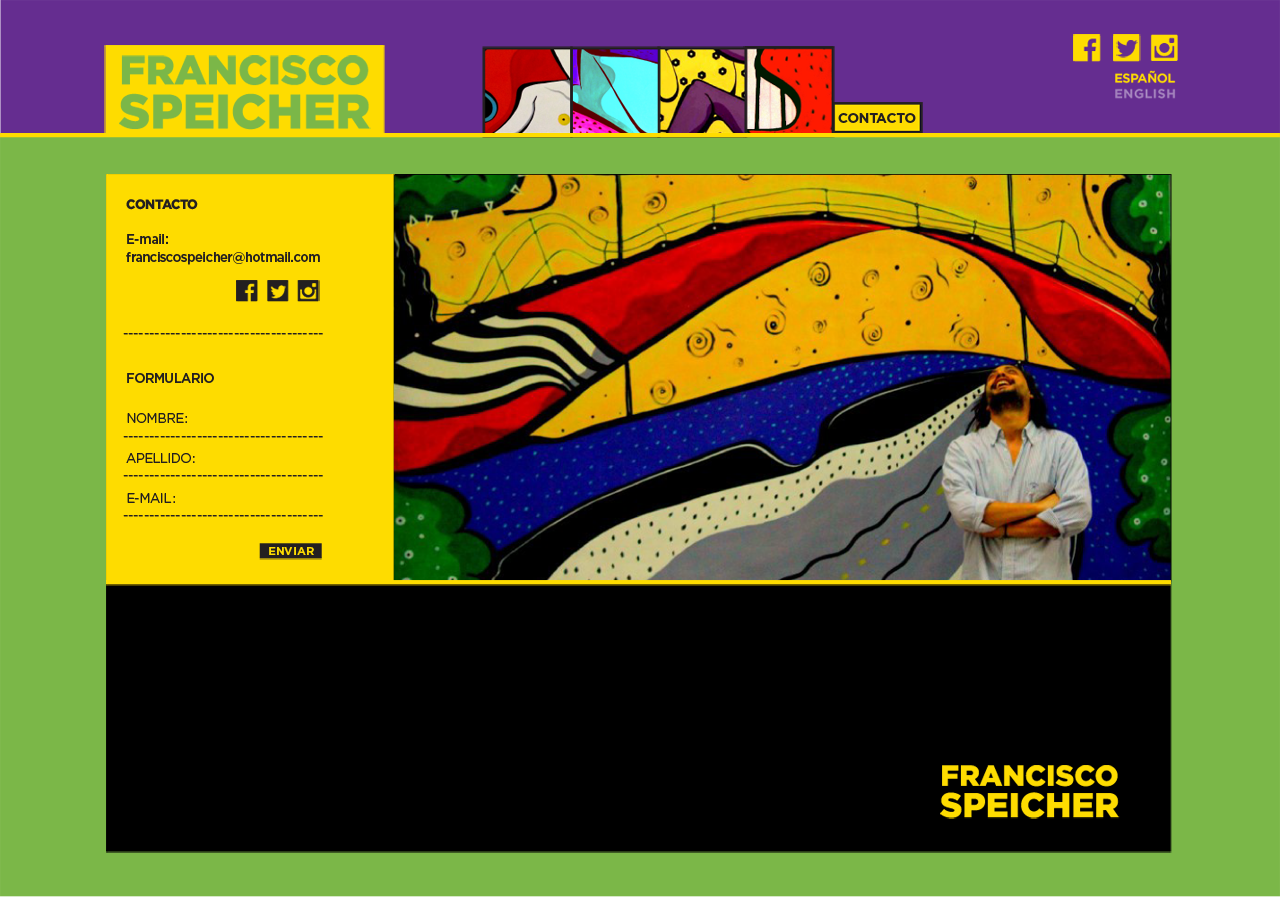
<style>
.page{position:relative;width:1280px;height:897px;background:#000000}
.page>*{position:absolute;margin:0}
.t1{font:13.7px "GothamBold";letter-spacing:-0.02em;color:#231f20}
.t2{font:13.7px/17.4px "GothamMedium";letter-spacing:-0.036em;color:#231f20;scale:0.95 1}
.t3{font:13.7px/17.4px "Gotham-Black";letter-spacing:-0.036em;color:#231f20;scale:0.95 1}
.t4{font:13.7px "GothamBook";color:#231f20;scale:0.95 1}
.t5{font:13.7px/19.9px "GothamBook";letter-spacing:-0.036em;color:#231f20;scale:0.95 1}
.t6{font:13.7px/19.9px "GothamMedium";letter-spacing:-0.036em;color:#231f20;scale:0.95 1}
.t7{font:11.3px "GothamBold";color:#fedc00}
</style>
<div class="page">
<p class="t1" style="left:838px;top:113px;width:78px;height:10px">CONTACTO</p>
<p class="t2" style="left:126px;top:199px;width:194px;height:66px"><span class="t3">CONTACTO<br></span><br>E-mail: franciscospeicher@hotmail.com</p>
<p class="t4" style="left:123px;top:333px;width:200px;height:2px">--------------------------------------</p>
<p class="t5" style="left:126px;top:373px;width:88px;height:130px"><span class="t6">FORMULARIO <br><br></span>NOMBRE:<br><br>APELLIDO:<br><br>E-MAIL:</p>
<p class="t4" style="left:123px;top:436px;width:200px;height:2px">--------------------------------------</p>
<p class="t4" style="left:123px;top:475px;width:200px;height:2px">--------------------------------------</p>
<p class="t4" style="left:123px;top:515px;width:200px;height:2px">--------------------------------------</p>
<p class="t7" style="left:269px;top:547px;width:45px;height:8px">ENVIAR</p>
</div>
